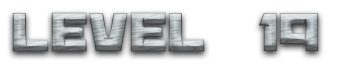
<style>
.page{position:relative;width:364px;height:64px;background:#ffffff}
.page>*{position:absolute;margin:0}
.t1{font:60px "BananaBrick"}
</style>
<div class="page">
<p class="t1" style="left:12px;top:12px;width:307px;height:40px">Level  19</p>
</div>
